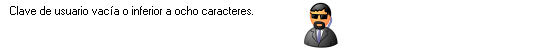
<style>
.page{position:relative;width:552px;height:52px;background:#ffffff}
.page>*{position:absolute;margin:0}
.t1{font:11.4px "MS Sans Serif";color:#000000}
</style>
<div class="page">
<p class="t1" style="left:10px;top:6px;width:243px;height:9px">Clave de usuario vacía o inferior a ocho caracteres.</p>
</div>
